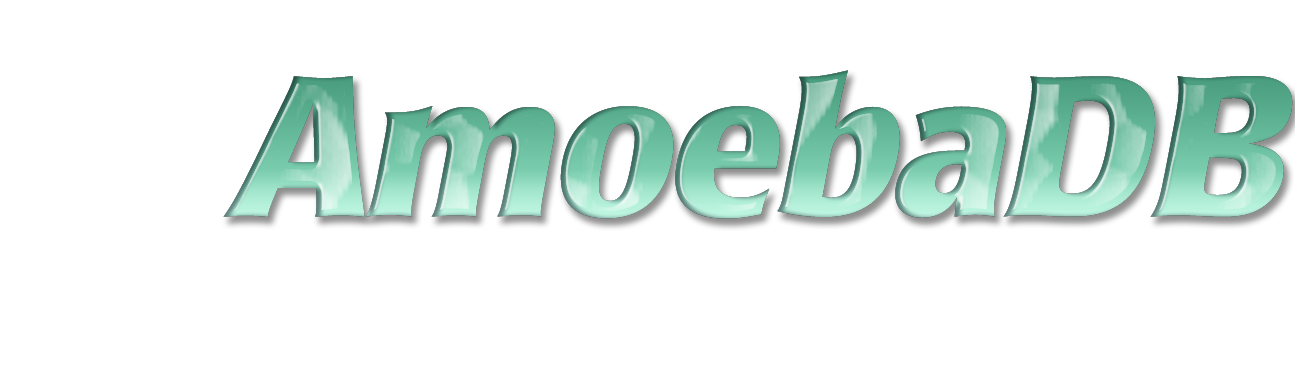
<style>
.page{position:relative;width:1295px;height:377px;background:#ffffff}
.page>*{position:absolute;margin:0}
.t1{font:200px "PopplLaudatio-Bold";letter-spacing:-0.02em}
</style>
<div class="page">
<p class="t1" style="left:223px;top:70px;width:1070px;height:149px">AmoebaDB</p>
</div>
